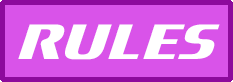
<style>
.page{position:relative;width:233px;height:82px;background:#d953e9}
.page>*{position:absolute;margin:0}
.t1{font:56.4px "Motorwerk";color:#ffffff}
</style>
<div class="page">
<p class="t1" style="left:18px;top:24px;width:202px;height:36px">Rules</p>
</div>
